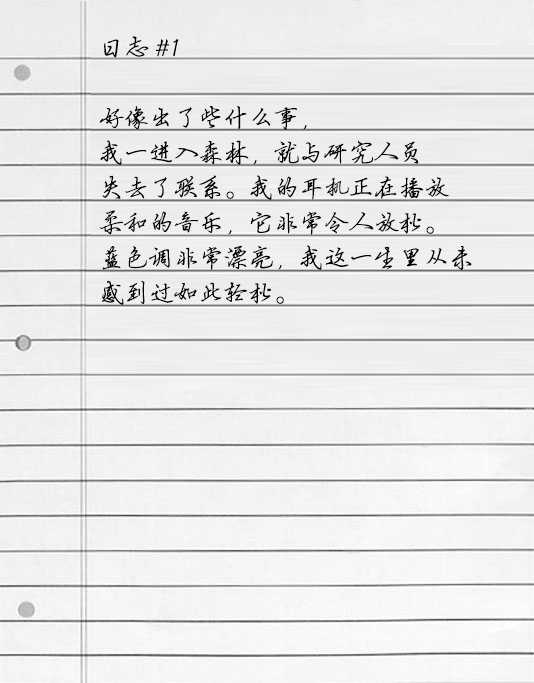
<style>
.page{position:relative;width:534px;height:683px}
.page>*{position:absolute;margin:0}
.t1{font:25px/35px "FZYBXSJW--GB1-0";color:#000000}
</style>
<div class="page">
<p class="t1" style="left:99px;top:36px;width:373px;height:269px">日志 #1<br><br>好像出了些什么事，<br>我一进入森林，就与研究人员<br>失去了联系。我的耳机正在播放<br>柔和的音乐，它非常令人放松。<br>蓝色调非常漂亮，我这一生里从未<br>感到过如此轻松。</p>
</div>
